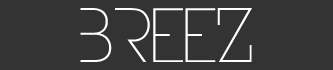
<style>
.page{position:relative;width:333px;height:70px;background:#333333}
.page>*{position:absolute;margin:0}
.t1{font:72px "DevilBreezeLight";color:#ffffff}
</style>
<div class="page">
<p class="t1" style="left:80px;top:8px;width:172px;height:54px">BREEZ</p>
</div>
